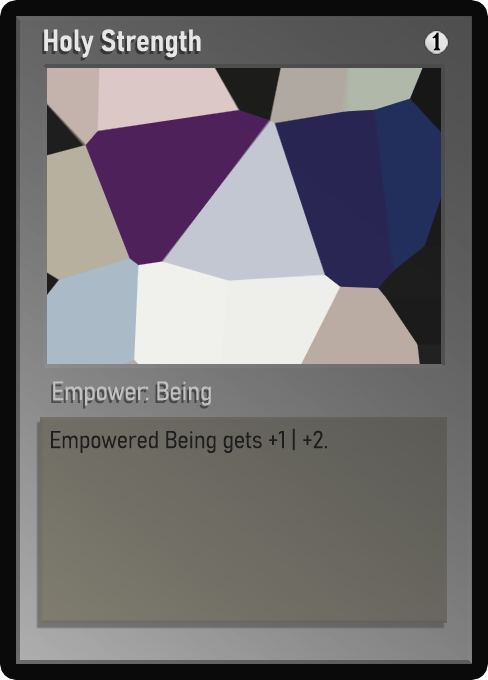
<style>
.page{position:relative;width:488px;height:680px}
.page>*{position:absolute;margin:0}
.t1{font:30px "Bahnschrift-SemiBoldSemiCondensed";color:#f2f2f2;font-weight:bold}
.t2{font:25px "WTRRoycroft";color:#000000;font-weight:bold;scale:1.09 1}
.t3{font:26px "Bahnschrift-LightSemiCondensed";color:#c8c8c8;font-weight:bold}
.t4{font:24px "Bahnschrift-LightSemiCondensed";color:#1e1e1e;font-weight:bold}
</style>
<div class="page">
<p class="t1" style="left:44px;top:29px;width:157px;height:29px;opacity:0.9">Holy Strength</p>
<p class="t2" style="left:432px;top:32px;width:9px;height:19px">1</p>
<p class="t3" style="left:53px;top:381px;width:158px;height:25px;opacity:0.9">Empower: Being</p>
<p class="t4" style="left:51px;top:428px;width:276px;height:25px">Empowered Being gets +1 | +2.</p>
</div>
